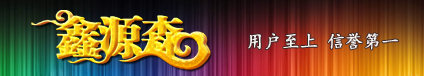
<style>
.page{position:relative;width:424px;height:76px}
.page>*{position:absolute;margin:0}
.t1{font:18px "¿¬Ìå-Regular";color:#f6f3f0;font-weight:bold}
</style>
<div class="page">
<p class="t1" style="left:248px;top:32px;width:151px;height:18px">用户至上 信誉第一</p>
</div>
